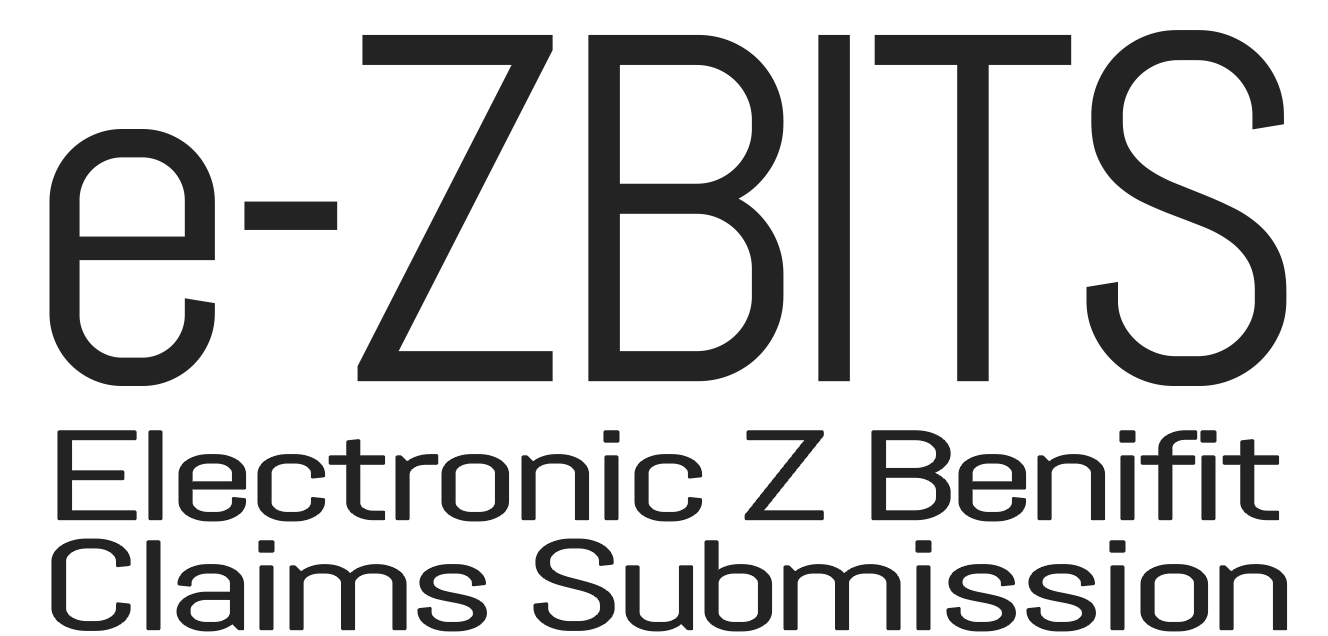
<style>
.page{position:relative;width:1328px;height:636px;background:#ffffff}
.page>*{position:absolute;margin:0}
.t1{font:493.6px "Abel-Regular";letter-spacing:-0.075em;color:#232323;font-weight:bold}
.t2{font:124.8px "Abel-Regular";letter-spacing:-0.075em;color:#232323;font-weight:bold;scale:1.56 1}
</style>
<div class="page">
<p class="t1" style="left:49px;top:30px;width:1238px;height:356px">e-ZBITS</p>
<p class="t2" style="left:58px;top:431px;width:1221px;height:90px">Electronic Z Benifit</p>
<p class="t2" style="left:52px;top:539px;width:1235px;height:92px">Claims Submission</p>
</div>
